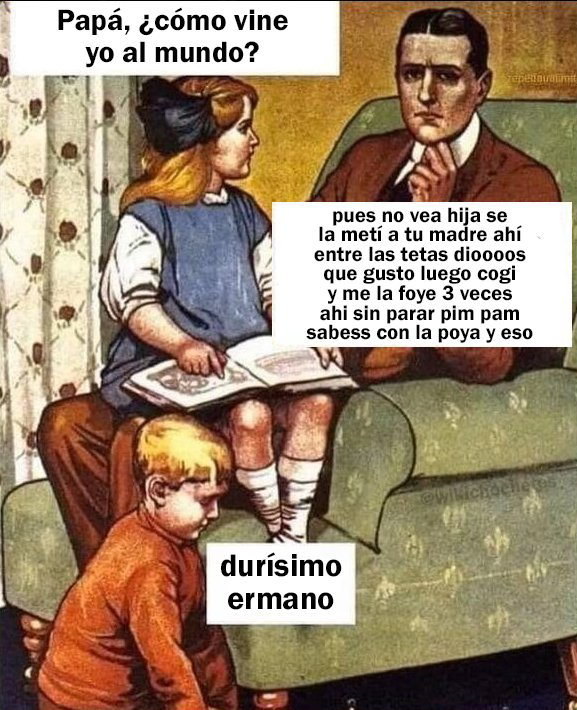
<style>
.page{position:relative;width:577px;height:710px}
.page>*{position:absolute;margin:0}
.t1{font:30.2px "FranklinGothic-Demi";color:#000000}
.t2{font:21.2px "FranklinGothic-Demi";color:#000000}
.t3{font:32.3px "FranklinGothic-Demi";color:#000000}
</style>
<div class="page">
<p class="t1" style="left:58px;top:7px;width:230px;height:61px;text-align:center">Papá, ¿cómo vine<br>yo al mundo?</p>
<p class="t2" style="left:306px;top:207px;width:227px;height:136px;text-align:center">pues no vea hija se<br>la metí a tu madre ahí<br>entre las tetas dioooos<br>que gusto luego cogi<br>y me la foye 3 veces<br>ahi sin parar pim pam<br>sabess con la poya y eso</p>
<p class="t3" style="left:221px;top:552px;width:121px;height:58px;text-align:center">durísimo<br>ermano</p>
</div>
